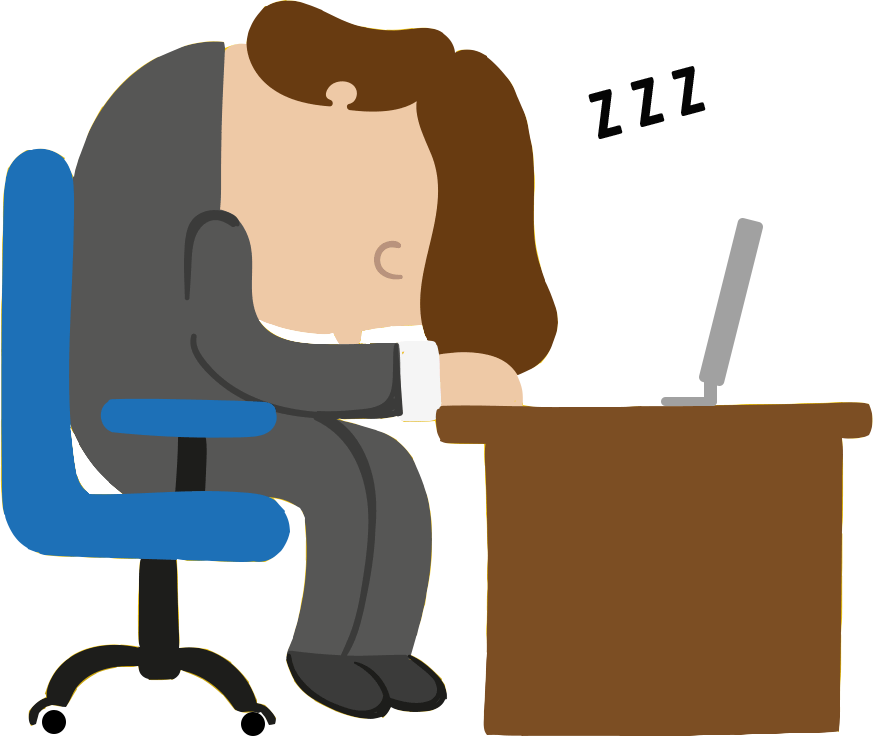
<style>
.page{position:relative;width:873px;height:736px;background:#ffffff}
.page>*{position:absolute;margin:0}
.t1{font:60px "NewAthleticM54";color:#050505}
</style>
<div class="page">
<p class="t1" style="left:588px;top:66px;width:118px;height:73px;rotate:-15deg">Z Z Z</p>
</div>
